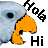
<style>
.page{position:relative;width:48px;height:48px;background:#ffffff}
.page>*{position:absolute;margin:0}
.t1{font:13.9px "MyriadPro-Bold";color:#000000}
</style>
<div class="page">
<p class="t1" style="left:23px;top:0px;width:23px;height:22px;rotate:40deg">Hola</p>
<p class="t1" style="left:31px;top:36px;width:12px;height:10px">Hi</p>
</div>
